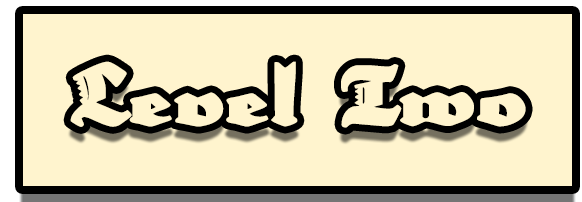
<style>
.page{position:relative;width:582px;height:202px;background:#fff4ce}
.page>*{position:absolute;margin:0}
.t1{font:79.9px "Neptun";color:#fff4ce}
</style>
<div class="page">
<p class="t1" style="left:70px;top:61px;width:456px;height:67px">Level Two</p>
</div>
